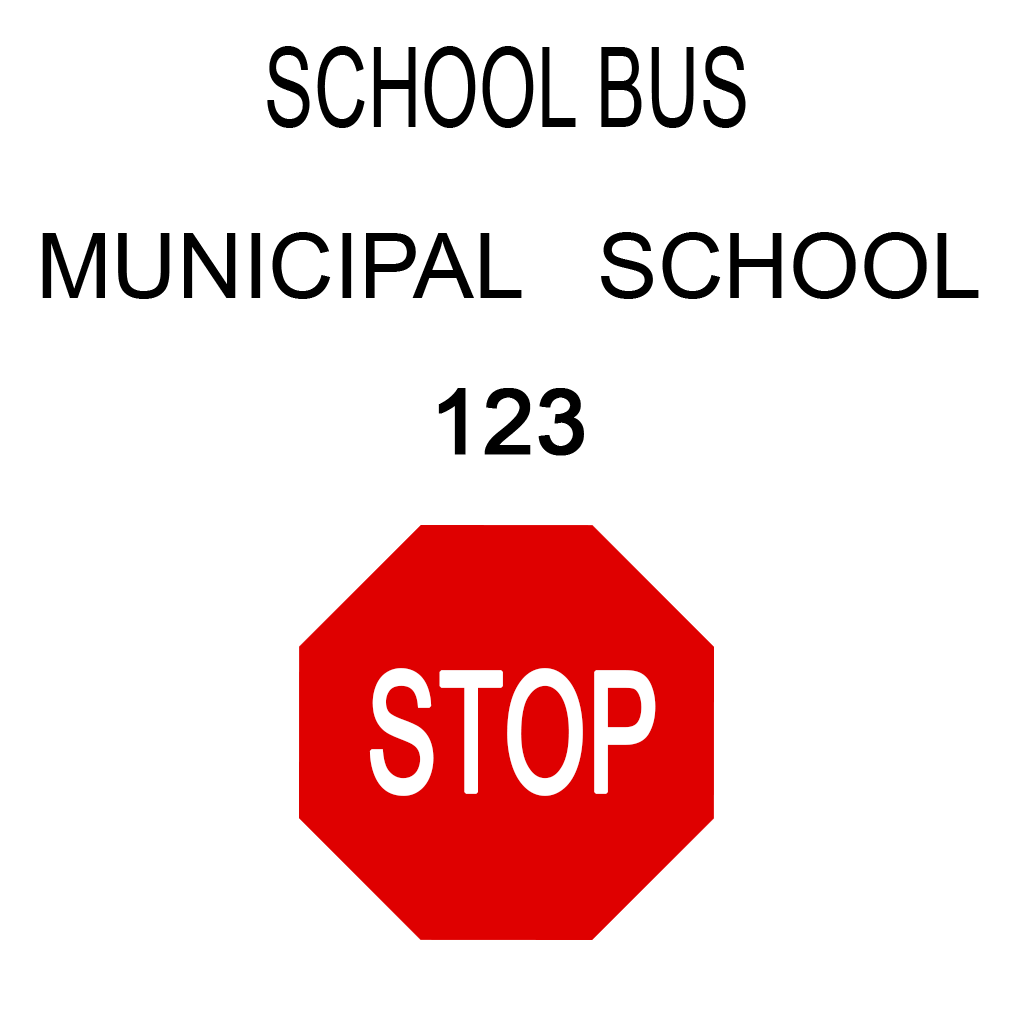
<style>
.page{position:relative;width:1024px;height:1024px;background:#ffffff}
.page>*{position:absolute;margin:0}
.t1{font:111px "ArialMT";color:#000000;scale:0.67 1}
.t2{font:91px "ArialMT";color:#000000}
.t3{font:91px "ArialMT";color:#000000;font-weight:bold}
.t4{font:167.4px "ArialMT";color:#ffffff;font-weight:bold;scale:0.62 1}
</style>
<div class="page">
<p class="t1" style="left:267px;top:46px;width:479px;height:82px">SCHOOL BUS</p>
<p class="t2" style="left:42px;top:232px;width:937px;height:67px">MUNICIPAL   SCHOOL</p>
<p class="t3" style="left:438px;top:388px;width:146px;height:68px">123</p>
<p class="t4" style="left:369px;top:668px;width:287px;height:128px">STOP</p>
</div>
